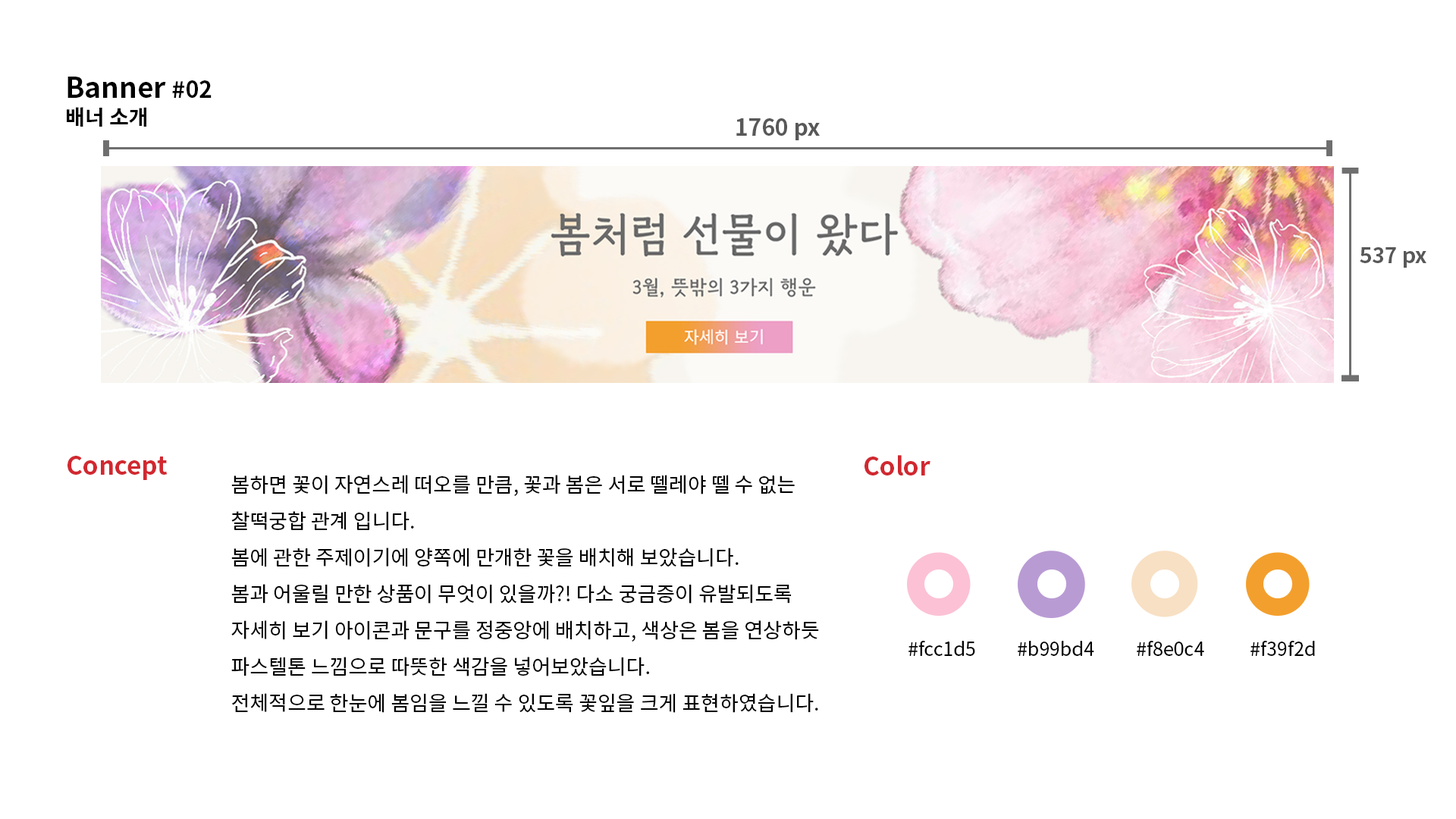
<style>
.page{position:relative;width:1456px;height:819px;background:#ffffff}
.page>*{position:absolute;margin:0}
.t1{font:28.1px/27.3px "NotoSansCJKkr-Bold";color:#000000}
.t2{font:22.7px/27.3px "NotoSansCJKkr-Bold";color:#000000}
.t3{font:21.2px/27.3px "NotoSansCJKkr-Bold";color:#000000}
.t4{font:22.7px "NotoSansCJKkr-Bold";color:#585858}
.t5{font:21.2px "NotoSansCJKkr-Bold";color:#585858}
.t6{font:25px "NotoSansCJKkr-Bold";color:#d12830}
.t7{font:20.5px/36.4px "NotoSansCJKkr-Regular";color:#000000}
.t8{font:19px "NotoSansCJKkr-Regular";color:#000000}
</style>
<div class="page">
<p class="t1" style="left:67px;top:77px;width:145px;height:50px">Banner <span class="t2">#02<br></span><span class="t3">배너 소개</span></p>
<p class="t4" style="left:736px;top:118px;width:84px;height:22px">1760 px</p>
<p class="t5" style="left:1360px;top:247px;width:66px;height:21px">537 px</p>
<p class="t6" style="left:67px;top:456px;width:100px;height:24px">Concept</p>
<p class="t6" style="left:864px;top:455px;width:66px;height:20px">Color</p>
<p class="t7" style="left:231px;top:475px;width:588px;height:238px">봄하면 꽃이 자연스레 떠오를 만큼, 꽃과 봄은 서로 뗄레야 뗄 수 없는 <br>찰떡궁합 관계 입니다. <br>봄에 관한 주제이기에 양쪽에 만개한 꽃을 배치해 보았습니다. <br>봄과 어울릴 만한 상품이 무엇이 있을까?! 다소 궁금증이 유발되도록<br>자세히 보기 아이콘과 문구를 정중앙에 배치하고, 색상은 봄을 연상하듯<br>파스텔톤 느낌으로 따뜻한 색감을 넣어보았습니다.<br>전체적으로 한눈에 봄임을 느낄 수 있도록 꽃잎을 크게 표현하였습니다.</p>
<p class="t8" style="left:908px;top:640px;width:67px;height:16px">#fcc1d5</p>
<p class="t8" style="left:1018px;top:641px;width:76px;height:15px">#b99bd4</p>
<p class="t8" style="left:1137px;top:640px;width:67px;height:16px">#f8e0c4</p>
<p class="t8" style="left:1250px;top:640px;width:65px;height:16px">#f39f2d</p>
</div>
